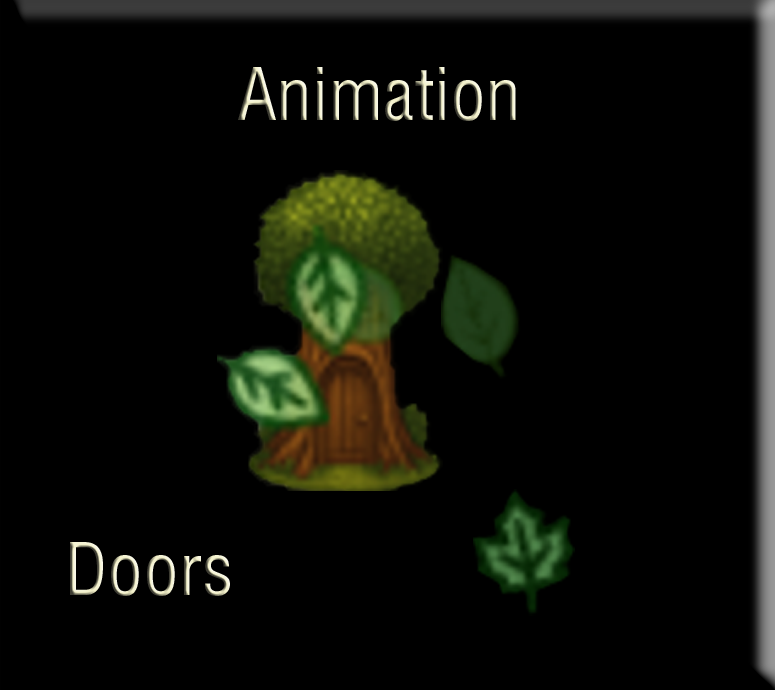
<style>
.page{position:relative;width:775px;height:690px;background:#000000}
.page>*{position:absolute;margin:0}
.t1{font:71px "HelveticaLTStd-Cond"}
</style>
<div class="page">
<p class="t1" style="left:238px;top:67px;width:278px;height:54px">Animation</p>
<p class="t1" style="left:70px;top:542px;width:160px;height:54px">Doors</p>
</div>
